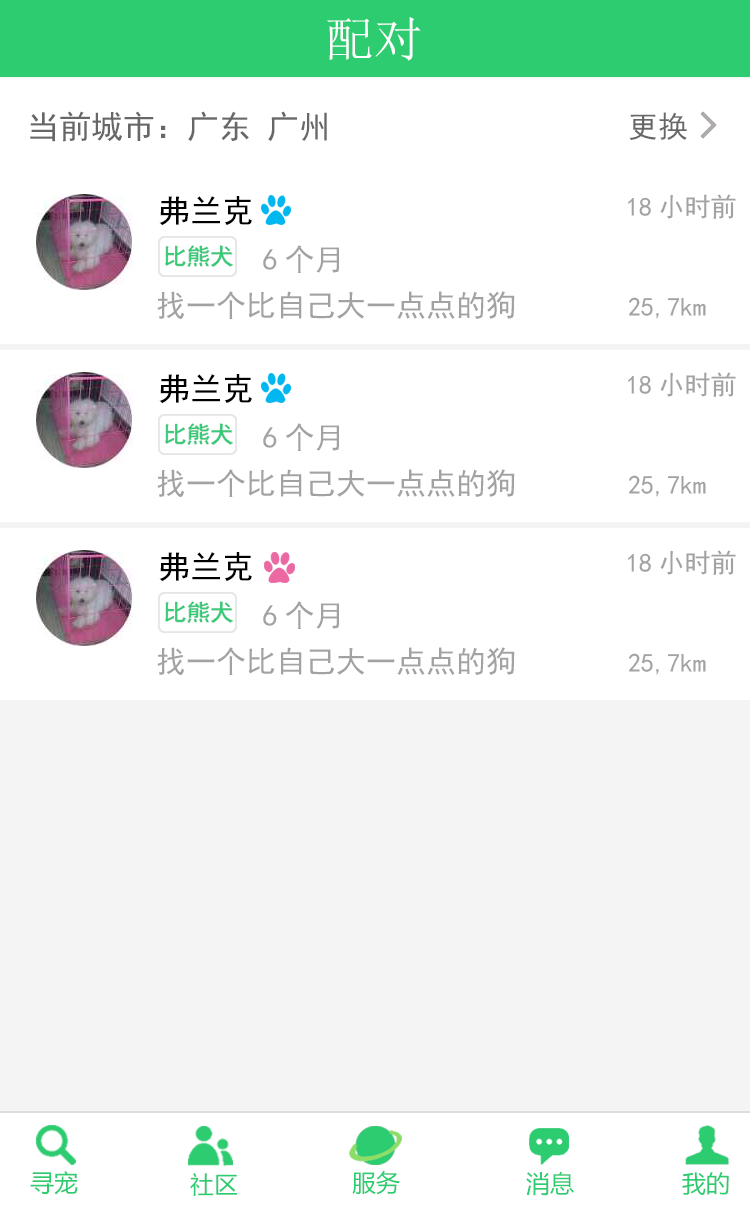
<style>
.page{position:relative;width:750px;height:1206px;background:#ffffff}
.page>*{position:absolute;margin:0}
.t1{font:48.7px "SimSun";color:#ffffff}
.t2{font:32px "SimHei";color:#676767}
.t3{font:30px "SimHei";color:#676767}
.t4{font:32px "SimHei";color:#000000}
.t5{font:26px "SimHei";color:#a2a2a2}
.t6{font:30px "SimHei";color:#a2a2a2}
.t7{font:24px "MicrosoftYaHei";color:#2ecc71}
.t8{font:24px "MicrosoftYaHei"}
</style>
<div class="page">
<p class="t1" style="left:327px;top:17px;width:94px;height:44px">配对</p>
<p class="t2" style="left:30px;top:111px;width:297px;height:31px">当前城市：广东 广州</p>
<p class="t3" style="left:629px;top:112px;width:58px;height:28px">更换</p>
<p class="t4" style="left:159px;top:196px;width:93px;height:30px">弗兰克</p>
<p class="t5" style="left:628px;top:194px;width:108px;height:25px">18小时前</p>
<p class="t6" style="left:263px;top:245px;width:76px;height:28px">6个月</p>
<p class="t6" style="left:157px;top:291px;width:358px;height:28px">找一个比自己大一点点的狗</p>
<p class="t5" style="left:628px;top:297px;width:78px;height:22px">25,7km</p>
<p class="t4" style="left:159px;top:374px;width:93px;height:30px">弗兰克</p>
<p class="t5" style="left:628px;top:372px;width:108px;height:25px">18小时前</p>
<p class="t6" style="left:263px;top:423px;width:76px;height:28px">6个月</p>
<p class="t6" style="left:157px;top:469px;width:358px;height:28px">找一个比自己大一点点的狗</p>
<p class="t5" style="left:628px;top:475px;width:78px;height:22px">25,7km</p>
<p class="t4" style="left:159px;top:552px;width:93px;height:30px">弗兰克</p>
<p class="t5" style="left:628px;top:550px;width:108px;height:25px">18小时前</p>
<p class="t6" style="left:263px;top:601px;width:76px;height:28px">6个月</p>
<p class="t6" style="left:157px;top:647px;width:358px;height:28px">找一个比自己大一点点的狗</p>
<p class="t5" style="left:628px;top:653px;width:78px;height:22px">25,7km</p>
<p class="t7" style="left:30px;top:1171px;width:48px;height:24px">寻宠</p>
<p class="t7" style="left:190px;top:1173px;width:47px;height:23px">社区</p>
<p class="t8" style="left:352px;top:1171px;width:48px;height:25px">服务</p>
<p class="t7" style="left:352px;top:1170px;width:48px;height:25px">服务</p>
<p class="t8" style="left:525px;top:1171px;width:48px;height:25px">消息</p>
<p class="t7" style="left:526px;top:1171px;width:48px;height:25px">消息</p>
<p class="t7" style="left:682px;top:1172px;width:47px;height:23px">我的</p>
<p class="t7" style="left:682px;top:1172px;width:47px;height:23px">我的</p>
</div>
